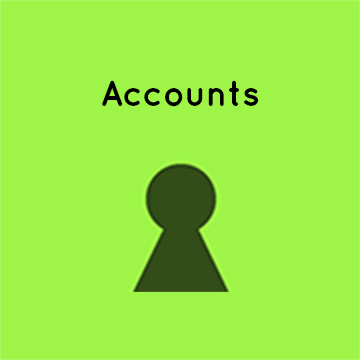
<style>
.page{position:relative;width:360px;height:360px;background:#9ef547}
.page>*{position:absolute;margin:0}
.t1{font:36px "QuicksandBold-Regular";color:#000000}
</style>
<div class="page">
<p class="t1" style="left:102px;top:80px;width:156px;height:27px">Accounts</p>
</div>
